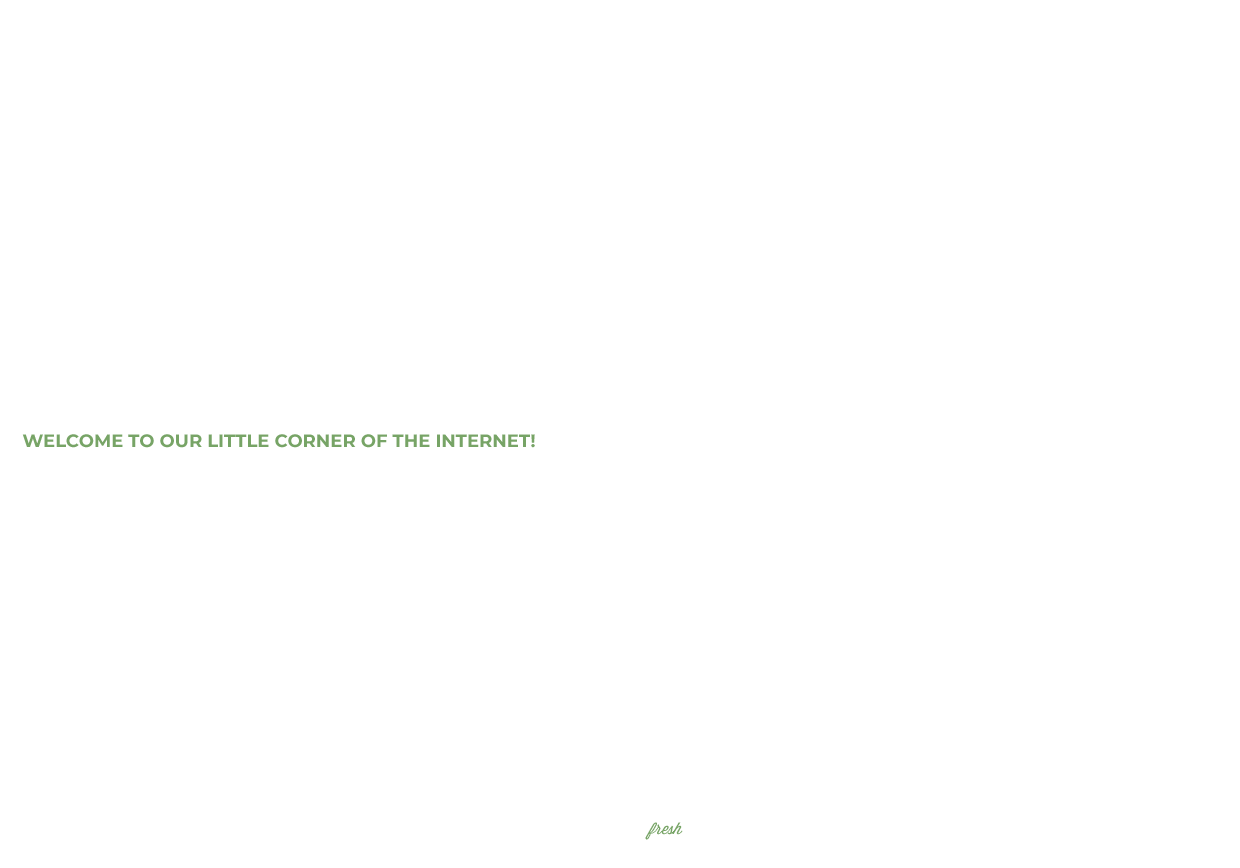
<style>
.page{position:relative;width:1240px;height:868px;background:#ffffff}
.page>*{position:absolute;margin:0}
.t1{font:18px "Montserrat-Bold";color:#77a466;text-transform:uppercase}
.t2{font:16px "Wisdom-Script";color:#77a466}
</style>
<div class="page">
<p class="t1" style="left:22px;top:434px;width:513px;height:14px">Welcome to our little corner of the internet!</p>
<p class="t2" style="left:645px;top:822px;width:38px;height:18px">fresh</p>
</div>
